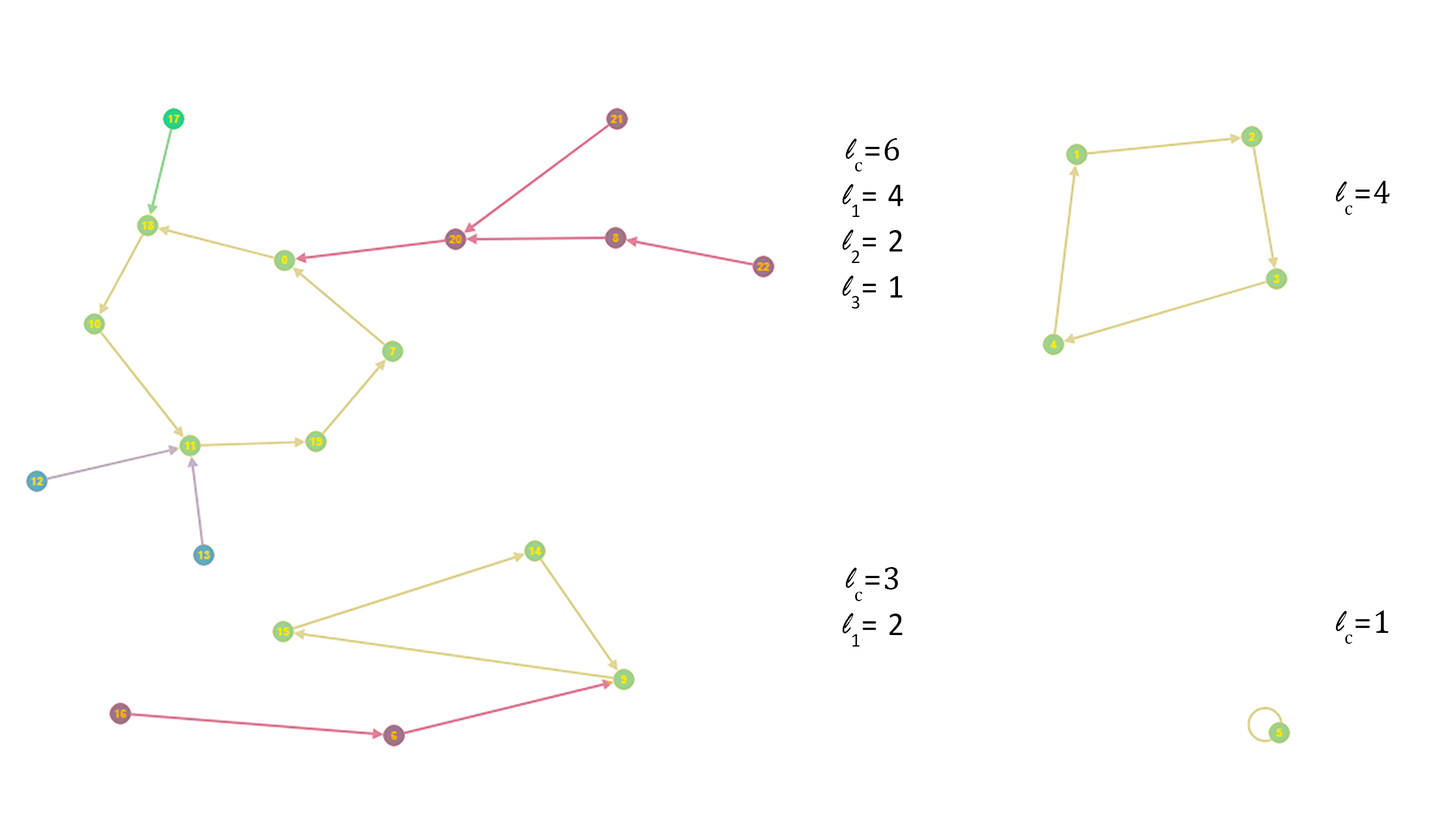
<style>
.page{position:relative;width:1449px;height:823px;background:#ffffff}
.page>*{position:absolute;margin:0}
.t1{font:33.6px/45.7px "Calibri";letter-spacing:0.04em;color:#000000;scale:0.97 1}
.t2{font:33.6px/45.7px "RageItalic";letter-spacing:0.04em;color:#000000;scale:0.97 1}
.t3{font:33.6px/45.7px "Cambria";letter-spacing:0.04em;color:#000000;scale:0.97 1}
.t4{font:33.6px "Cambria";letter-spacing:0.04em;color:#000000;scale:0.97 1}
.t5{font:33.6px "RageItalic";letter-spacing:0.04em;color:#000000;scale:0.97 1}
</style>
<div class="page">
<p class="t1" style="left:842px;top:138px;width:61px;height:171px;text-align:center"><span class="t2">l</span><span class="t3">c=6<br></span><span class="t2">l</span>1= 4<br><span class="t2">l</span>2= 2<br><span class="t2">l</span>3= 1</p>
<p class="t4" style="left:1335px;top:181px;width:54px;height:34px"><span class="t5">l</span>c=4</p>
<p class="t1" style="left:842px;top:567px;width:60px;height:80px;text-align:center"><span class="t2">l</span><span class="t3">c=3<br></span><span class="t2">l</span>1= 2</p>
<p class="t4" style="left:1335px;top:611px;width:53px;height:33px"><span class="t5">l</span>c=1</p>
</div>
